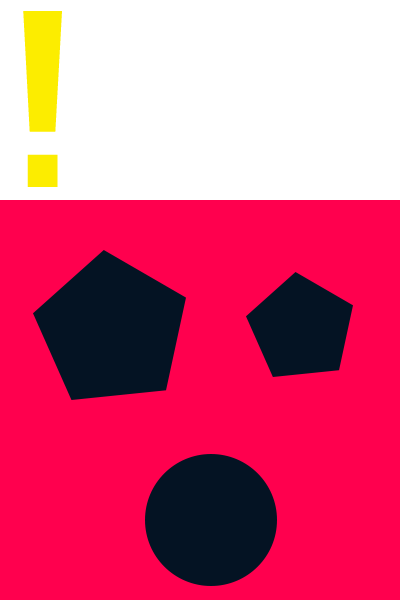
<style>
.page{position:relative;width:400px;height:600px;background:#ff004e}
.page>*{position:absolute;margin:0}
.t1{font:247.5px "Atami-Display";letter-spacing:0.2em;color:#fced00}
</style>
<div class="page">
<p class="t1" style="left:23px;top:11px;width:39px;height:176px">!</p>
</div>
